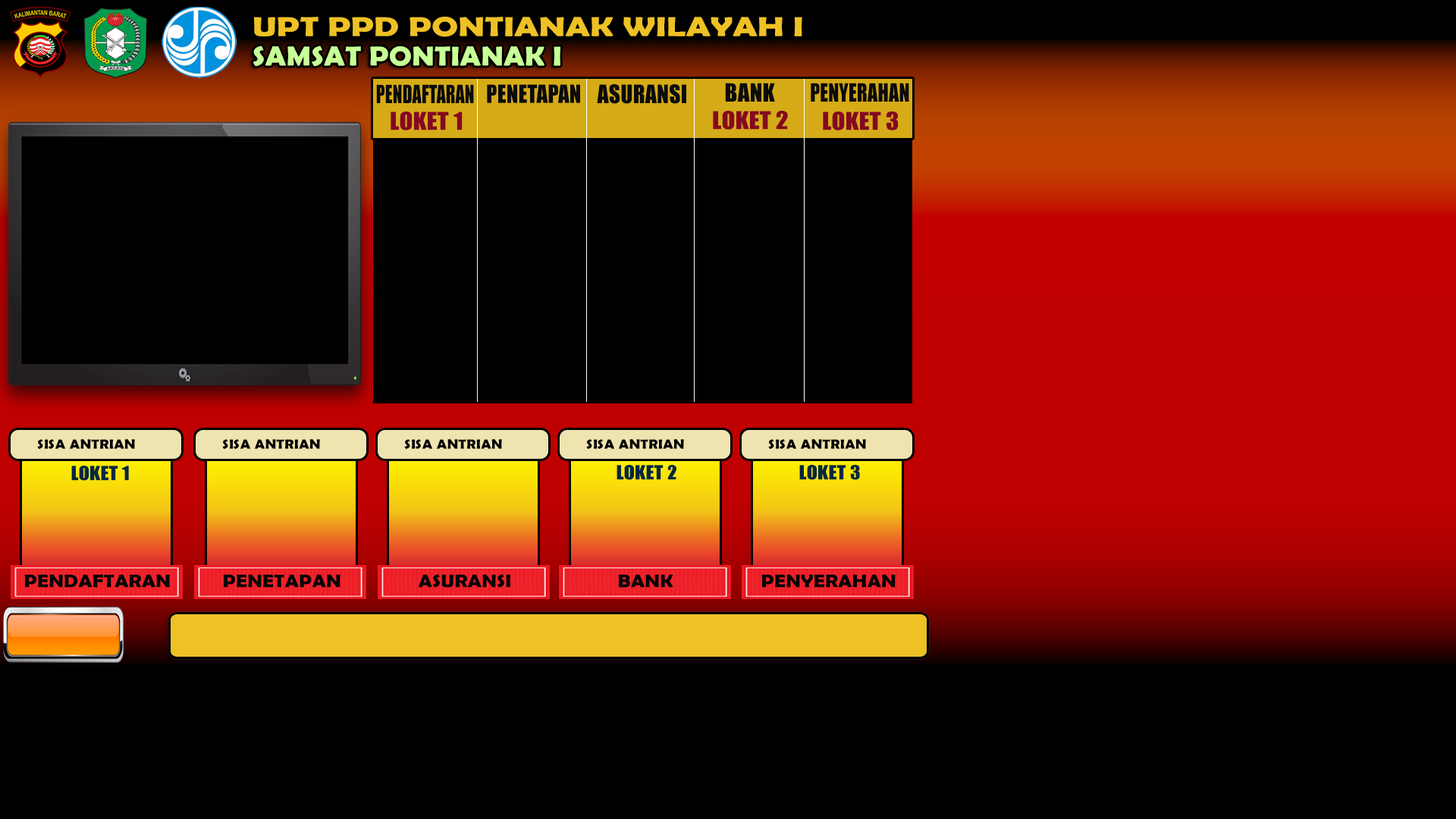
<style>
.page{position:relative;width:1456px;height:819px;background:#000000}
.page>*{position:absolute;margin:0}
.t1{font:27.5px "BerlinSansFBDemi-Bold";letter-spacing:0.01em;color:#eec125;scale:1.27 1}
.t2{font:27.3px "BerlinSansFBDemi-Bold";letter-spacing:0.01em;color:#c7fe95;scale:1.1 1}
.t3{font:23.4px "Impact";letter-spacing:0.01em;color:#0b0b0b;scale:0.76 1}
.t4{font:23.4px "Impact";letter-spacing:0.01em;color:#0b0b0b;scale:0.92 1}
.t5{font:23.4px "Impact";letter-spacing:0.01em;color:#0b0b0b;scale:0.95 1}
.t6{font:23.4px "Impact";letter-spacing:0.01em;color:#0b0b0b}
.t7{font:23.4px "Impact";letter-spacing:0.01em;color:#0b0b0b;scale:0.84 1}
.t8{font:22.7px "Impact";letter-spacing:0.01em;color:#860820;scale:1.1 1}
.t9{font:13.6px "BerlinSansFBDemi-Bold";letter-spacing:0.01em;color:#050505;scale:1.1 1}
.t10{font:18.2px "Impact";letter-spacing:0.01em;color:#01283d;scale:1.1 1}
.t11{font:18.2px "BerlinSansFBDemi-Bold";letter-spacing:0.01em;color:#050505;scale:1.1 1}
</style>
<div class="page">
<p class="t1" style="left:254px;top:17px;width:548px;height:20px">UPT PPD PONTIANAK WILAYAH I</p>
<p class="t2" style="left:253px;top:45px;width:307px;height:22px">SAMSAT PONTIANAK I</p>
<p class="t3" style="left:376px;top:84px;width:98px;height:19px">PENDAFTARAN</p>
<p class="t4" style="left:487px;top:84px;width:93px;height:19px">PENETAPAN</p>
<p class="t5" style="left:597px;top:84px;width:89px;height:20px">ASURANSI</p>
<p class="t6" style="left:725px;top:83px;width:50px;height:19px">BANK</p>
<p class="t7" style="left:811px;top:83px;width:98px;height:19px">PENYERAHAN</p>
<p class="t8" style="left:391px;top:111px;width:72px;height:19px">LOKET 1</p>
<p class="t8" style="left:713px;top:111px;width:75px;height:19px">LOKET 2</p>
<p class="t8" style="left:823px;top:111px;width:76px;height:19px">LOKET 3</p>
<p class="t9" style="left:37px;top:439px;width:98px;height:10px">SISA ANTRIAN</p>
<p class="t9" style="left:222px;top:439px;width:98px;height:10px">SISA ANTRIAN</p>
<p class="t9" style="left:404px;top:439px;width:98px;height:10px">SISA ANTRIAN</p>
<p class="t9" style="left:586px;top:439px;width:98px;height:10px">SISA ANTRIAN</p>
<p class="t9" style="left:768px;top:439px;width:98px;height:10px">SISA ANTRIAN</p>
<p class="t10" style="left:71px;top:466px;width:58px;height:15px">LOKET 1</p>
<p class="t10" style="left:617px;top:465px;width:59px;height:15px">LOKET 2</p>
<p class="t10" style="left:799px;top:465px;width:61px;height:15px">LOKET 3</p>
<p class="t11" style="left:24px;top:574px;width:146px;height:14px">PENDAFTARAN</p>
<p class="t11" style="left:223px;top:574px;width:117px;height:14px">PENETAPAN</p>
<p class="t11" style="left:418px;top:574px;width:92px;height:14px">ASURANSI</p>
<p class="t11" style="left:618px;top:574px;width:55px;height:14px">BANK</p>
<p class="t11" style="left:761px;top:574px;width:135px;height:14px">PENYERAHAN</p>
</div>
